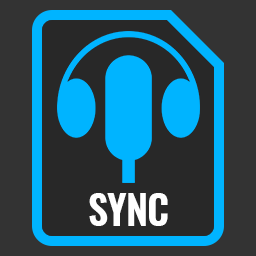
<style>
.page{position:relative;width:256px;height:256px;background:#282828}
.page>*{position:absolute;margin:0}
.t1{font:40px "Oswald-SemiBold";letter-spacing:-0.025em;color:#ffffff}
</style>
<div class="page">
<p class="t1" style="left:89px;top:193px;width:79px;height:33px">SYNC</p>
</div>
